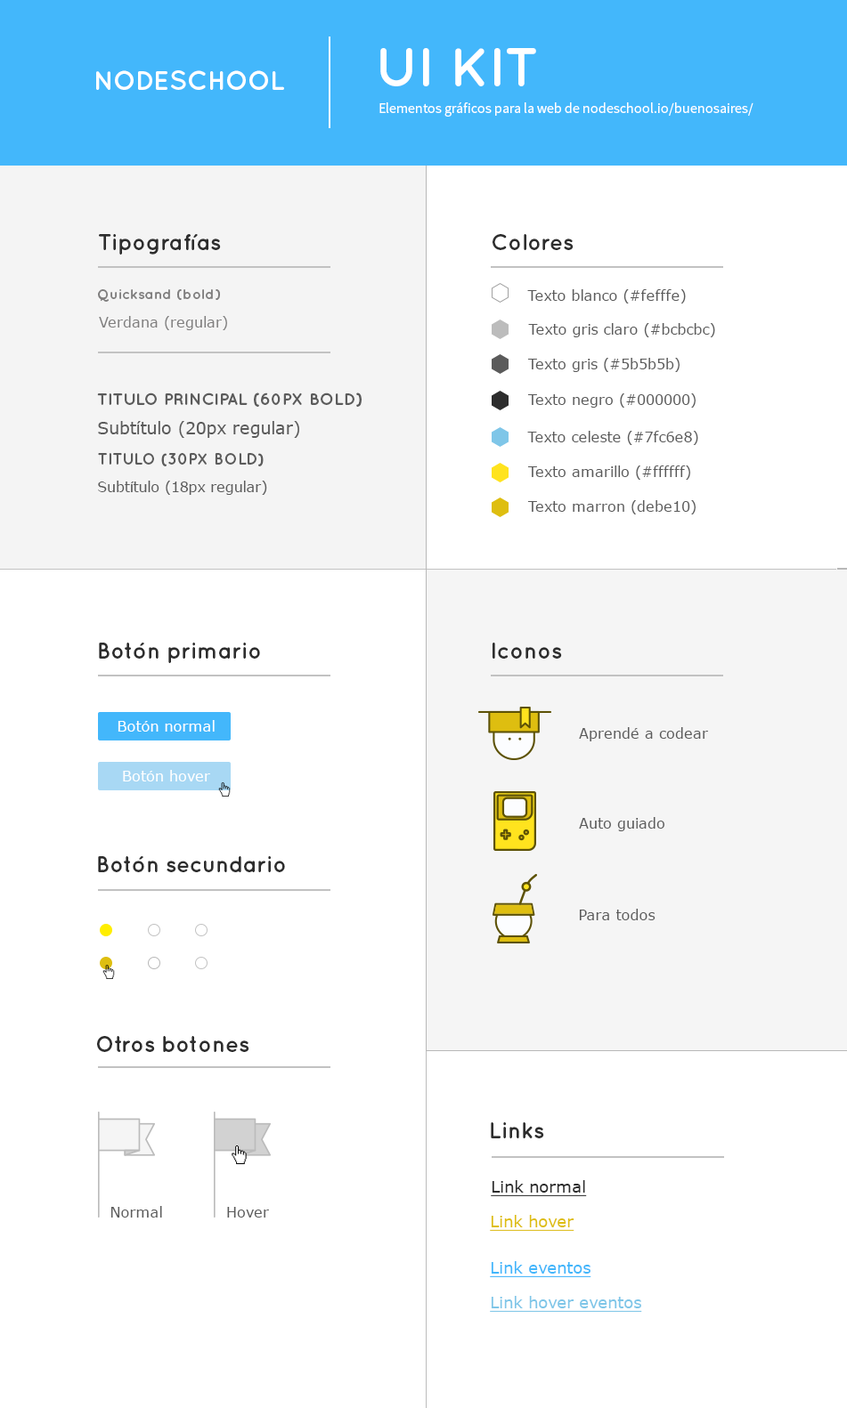
<style>
.page{position:relative;width:847px;height:1408px;background:#ffffff}
.page>*{position:absolute;margin:0}
.t1{font:54.6px "Quicksand-Bold";color:#ffffff;text-transform:uppercase}
.t2{font:26.7px "Quicksand-Bold";color:#ffffff;text-transform:uppercase}
.t3{font:14.2px "SourceSansPro-Regular";color:#ffffff}
.t4{font:22.3px "Quicksand-Bold";color:#2d2d2d}
.t5{font:22.3px "Quicksand-Bold";color:#2d2d2d;text-transform:uppercase}
.t6{font:14.2px "Quicksand-Bold";color:#7f7e7e}
.t7{font:14.2px "Verdana";color:#5b5b5b}
.t8{font:14.2px "Verdana";color:#7f7e7e}
.t9{font:16.7px "Quicksand-Bold";color:#5b5b5b;text-transform:uppercase}
.t10{font:16.7px "Verdana";color:#5b5b5b}
.t11{font:15.8px "Quicksand-Bold";color:#5b5b5b;text-transform:uppercase}
.t12{font:14px "Verdana";color:#5b5b5b}
.t13{font:14.2px "Verdana";color:#ffffff}
.t14{font:16px "Verdana";color:#2d2d2d;text-decoration:underline}
.t15{font:16px "Verdana";color:#debe10;text-decoration:underline}
.t16{font:16px "Verdana";color:#42b6fb;text-decoration:underline}
.t17{font:16px "Verdana";color:#7fc6e8;text-decoration:underline}
</style>
<div class="page">
<p class="t1" style="left:380px;top:48px;width:156px;height:38px">UI KIT</p>
<p class="t2" style="left:96px;top:70px;width:188px;height:20px">Nodeschool</p>
<p class="t3" style="left:379px;top:102px;width:374px;height:15px">Elementos gráficos para la web de nodeschool.io/buenosaires/</p>
<p class="t4" style="left:99px;top:234px;width:122px;height:21px"><span class="t5">T</span>ipografías</p>
<p class="t4" style="left:492px;top:234px;width:81px;height:16px"><span class="t5">C</span>olores</p>
<p class="t6" style="left:98px;top:289px;width:122px;height:13px">Quicksand (bold)</p>
<p class="t7" style="left:527px;top:289px;width:159px;height:15px">Texto blanco (#fefffe)</p>
<p class="t8" style="left:99px;top:316px;width:128px;height:14px">Verdana (regular)</p>
<p class="t7" style="left:528px;top:323px;width:187px;height:14px">Texto gris claro (#bcbcbc)</p>
<p class="t7" style="left:527px;top:358px;width:152px;height:14px">Texto gris (#5b5b5b)</p>
<p class="t9" style="left:97px;top:393px;width:264px;height:14px">Titulo principal (60px bold)</p>
<p class="t7" style="left:527px;top:394px;width:168px;height:14px">Texto negro (#000000)</p>
<p class="t10" style="left:98px;top:421px;width:201px;height:17px">Subtítulo (20px regular)</p>
<p class="t7" style="left:527px;top:431px;width:171px;height:14px">Texto celeste (#7fc6e8)</p>
<p class="t11" style="left:98px;top:453px;width:166px;height:14px">Titulo (30px bold)</p>
<p class="t7" style="left:527px;top:466px;width:163px;height:14px">Texto amarillo (#ffffff)</p>
<p class="t12" style="left:98px;top:481px;width:169px;height:14px">Subtítulo (18px regular)</p>
<p class="t7" style="left:527px;top:500px;width:168px;height:15px">Texto marron (debe10)</p>
<p class="t4" style="left:99px;top:643px;width:161px;height:20px">Botón primario</p>
<p class="t4" style="left:492px;top:643px;width:70px;height:16px">Iconos</p>
<p class="t13" style="left:118px;top:720px;width:97px;height:12px">Botón normal</p>
<p class="t7" style="left:579px;top:727px;width:129px;height:15px">Aprendé a codear</p>
<p class="t13" style="left:123px;top:770px;width:87px;height:12px">Botón hover</p>
<p class="t7" style="left:579px;top:817px;width:85px;height:15px">Auto guiado</p>
<p class="t4" style="left:98px;top:856px;width:187px;height:16px">Botón secundario</p>
<p class="t7" style="left:579px;top:909px;width:76px;height:12px">Para todos</p>
<p class="t4" style="left:97px;top:1036px;width:152px;height:16px">Otros botones</p>
<p class="t4" style="left:491px;top:1123px;width:53px;height:16px">Links</p>
<p class="t14" style="left:491px;top:1181px;width:96px;height:16px">Link normal</p>
<p class="t7" style="left:110px;top:1206px;width:52px;height:12px">Normal</p>
<p class="t7" style="left:227px;top:1207px;width:42px;height:11px">Hover</p>
<p class="t15" style="left:490px;top:1215px;width:84px;height:16px">Link hover</p>
<p class="t16" style="left:490px;top:1262px;width:101px;height:16px">Link eventos</p>
<p class="t17" style="left:490px;top:1296px;width:152px;height:16px">Link hover eventos</p>
</div>
